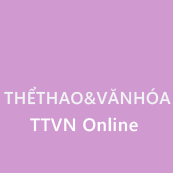
<style>
.page{position:relative;width:173px;height:173px;background:#d09ad1}
.page>*{position:absolute;margin:0}
.t1{font:17px "SegoeWP-Semibold";letter-spacing:0.025em;color:#f0f3f4}
.t2{font:18px "SegoeWP-Semibold";letter-spacing:0.025em;color:#ffffff}
</style>
<div class="page">
<p class="t1" style="left:4px;top:86px;width:167px;height:19px">THỂTHAO&amp;VĂNHÓA</p>
<p class="t2" style="left:30px;top:117px;width:108px;height:15px">TTVN Online</p>
</div>
